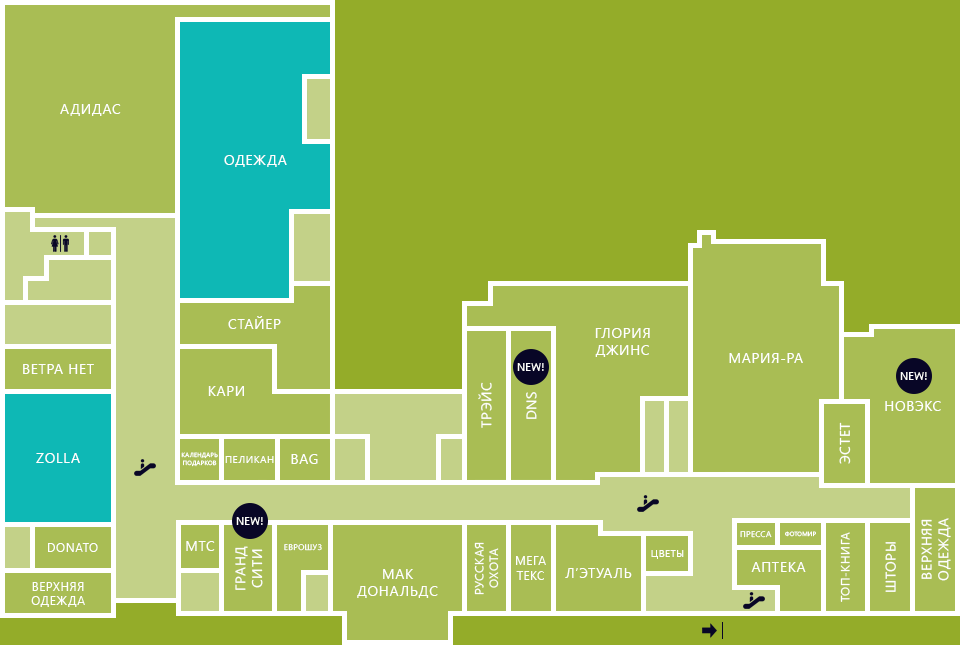
<style>
.page{position:relative;width:960px;height:645px;background:#a9bd54}
.page>*{position:absolute;margin:0}
.t1{font:14px "SegoeUI";letter-spacing:0.05em;color:#ffffff;text-transform:uppercase}
.t2{font:11px "SegoeUI";color:#ffffff;text-transform:uppercase}
.t3{font:6px "SegoeUI";letter-spacing:0.05em;color:#ffffff;text-transform:uppercase}
.t4{font:10px "SegoeUI";letter-spacing:0.05em;color:#ffffff;text-transform:uppercase}
.t5{font:8px "SegoeUI";letter-spacing:0.05em;color:#ffffff;text-transform:uppercase}
.t6{font:12px "SegoeUI";letter-spacing:0.05em;color:#ffffff;text-transform:uppercase}
</style>
<div class="page">
<p class="t1" style="left:60px;top:104px;width:61px;height:12px">Адидас</p>
<p class="t1" style="left:224px;top:155px;width:63px;height:12px">Одежда</p>
<p class="t1" style="left:228px;top:316px;width:53px;height:13px">Стайер</p>
<p class="t1" style="left:595px;top:328px;width:55px;height:29px;text-align:center">Глория<br>джинс</p>
<p class="t1" style="left:729px;top:353px;width:74px;height:10px">Мария-ра</p>
<p class="t1" style="left:23px;top:364px;width:71px;height:10px">Ветра нет</p>
<p class="t2" style="left:517px;top:363px;width:27px;height:8px">New!</p>
<p class="t2" style="left:900px;top:372px;width:27px;height:8px">New!</p>
<p class="t1" style="left:208px;top:386px;width:36px;height:10px">Кари</p>
<p class="t1" style="left:478px;top:382px;width:14px;height:46px;rotate:-90deg">Трэйс</p>
<p class="t1" style="left:526px;top:392px;width:11px;height:27px;rotate:-90deg">Dns</p>
<p class="t1" style="left:885px;top:401px;width:56px;height:10px">Новэкс</p>
<p class="t1" style="left:839px;top:422px;width:12px;height:42px;rotate:-90deg">Эстет</p>
<p class="t1" style="left:36px;top:453px;width:44px;height:10px">Zolla</p>
<p class="t3" style="left:181px;top:452px;width:37px;height:15px;text-align:center">Календарь<br>подарков</p>
<p class="t4" style="left:225px;top:456px;width:49px;height:7px">Пеликан</p>
<p class="t1" style="left:291px;top:454px;width:27px;height:10px">Bag</p>
<p class="t2" style="left:236px;top:517px;width:27px;height:8px">New!</p>
<p class="t1" style="left:921px;top:518px;width:30px;height:63px;text-align:center;rotate:-90deg">Верхняя<br>одежда</p>
<p class="t5" style="left:740px;top:531px;width:32px;height:7px">Пресса</p>
<p class="t3" style="left:785px;top:531px;width:31px;height:6px">Фотомир</p>
<p class="t6" style="left:840px;top:532px;width:10px;height:70px;rotate:-90deg">Топ-книга</p>
<p class="t6" style="left:48px;top:543px;width:50px;height:9px">Donato</p>
<p class="t1" style="left:186px;top:541px;width:29px;height:10px">Мтс</p>
<p class="t5" style="left:284px;top:544px;width:38px;height:7px">Еврошуз</p>
<p class="t6" style="left:474px;top:542px;width:25px;height:53px;text-align:center;rotate:-90deg">Русская<br>охота</p>
<p class="t1" style="left:885px;top:542px;width:11px;height:50px;rotate:-90deg">Шторы</p>
<p class="t1" style="left:235px;top:546px;width:28px;height:44px;text-align:center;rotate:-90deg">Гранд<br>сити</p>
<p class="t6" style="left:516px;top:556px;width:30px;height:24px;text-align:center">Мега<br>текс</p>
<p class="t4" style="left:651px;top:550px;width:33px;height:9px">Цветы</p>
<p class="t1" style="left:357px;top:569px;width:81px;height:29px;text-align:center">Мак<br>Дональдс</p>
<p class="t1" style="left:565px;top:568px;width:67px;height:10px">Л’ЭТУАЛЬ</p>
<p class="t1" style="left:751px;top:562px;width:55px;height:10px">Аптека</p>
<p class="t6" style="left:31px;top:582px;width:54px;height:25px;text-align:center">Верхняя<br>одежда</p>
</div>
